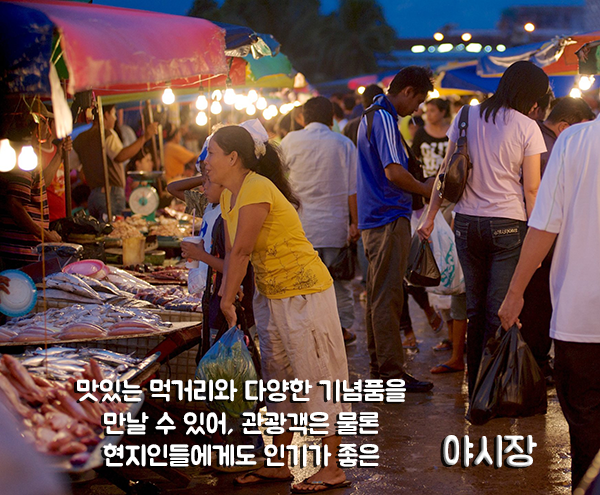
<style>
.page{position:relative;width:600px;height:495px}
.page>*{position:absolute;margin:0}
.t1{font:27px "BMJUA";color:#ffffff}
.t2{font:39.3px "BMJUA"}
</style>
<div class="page">
<p class="t1" style="left:77px;top:378px;width:329px;height:89px;text-align:center">맛있는 먹거리와 다양한 기념품을<br>만날 수 있어, 관광객은 물론<br>현지인들에게도 인기가 좋은</p>
<p class="t2" style="left:443px;top:435px;width:94px;height:33px">야시장</p>
</div>
